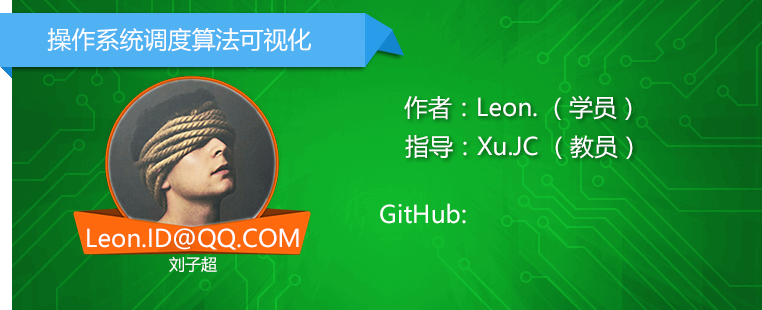
<style>
.page{position:relative;width:762px;height:310px}
.page>*{position:absolute;margin:0}
.t1{font:24px "MicrosoftYaHei";color:#ffffff}
.t2{font:24px/30px "MicrosoftYaHei";color:#ffffff}
.t3{font:16px/30px "MicrosoftYaHei";color:#ffffff}
</style>
<div class="page">
<p class="t1" style="left:47px;top:27px;width:264px;height:25px">操作系统调度算法可视化</p>
<p class="t1" style="left:404px;top:95px;width:228px;height:25px">作者：Leon. （学员）</p>
<p class="t1" style="left:405px;top:135px;width:228px;height:24px">指导：Xu.JC （教员）</p>
<p class="t1" style="left:380px;top:203px;width:86px;height:21px">GitHub:</p>
<p class="t2" style="left:87px;top:228px;width:212px;height:44px;text-align:center">Leon.ID@QQ.COM<br><span class="t3">刘子超</span></p>
</div>
